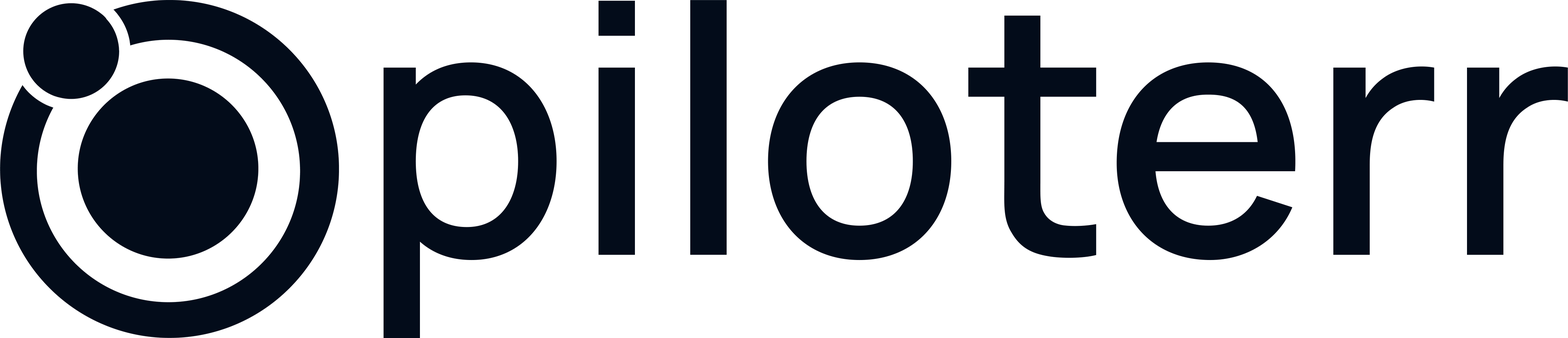
<style>
.page{position:relative;width:1568px;height:338px;background:#ffffff}
.page>*{position:absolute;margin:0}
.t1{font:332.6px "Manrope3-Semibold";color:#030c1a}
</style>
<div class="page">
<p class="t1" style="left:384px;top:0px;width:1184px;height:338px">piloterr</p>
</div>
